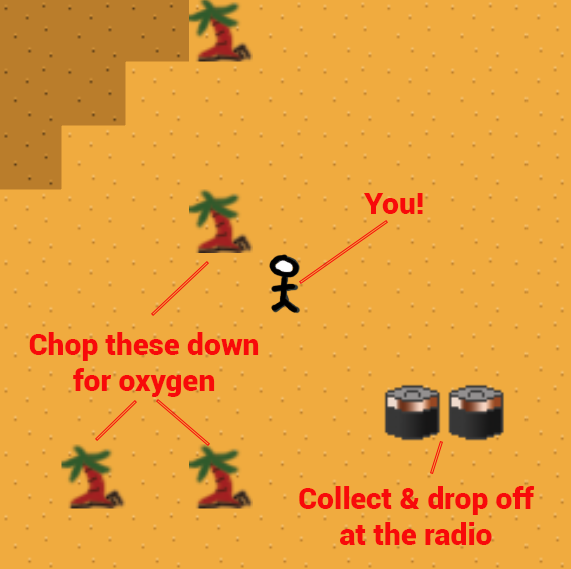
<style>
.page{position:relative;width:571px;height:569px;background:#f0ab3f}
.page>*{position:absolute;margin:0}
.t1{font:30px "Roboto-Black";color:#f80a0a}
</style>
<div class="page">
<p class="t1" style="left:364px;top:193px;width:59px;height:21px">You!</p>
<p class="t1" style="left:29px;top:332px;width:230px;height:65px;text-align:center">Chop these down<br>for oxygen</p>
<p class="t1" style="left:299px;top:486px;width:236px;height:59px;text-align:center">Collect &amp; drop off<br>at the radio</p>
</div>
